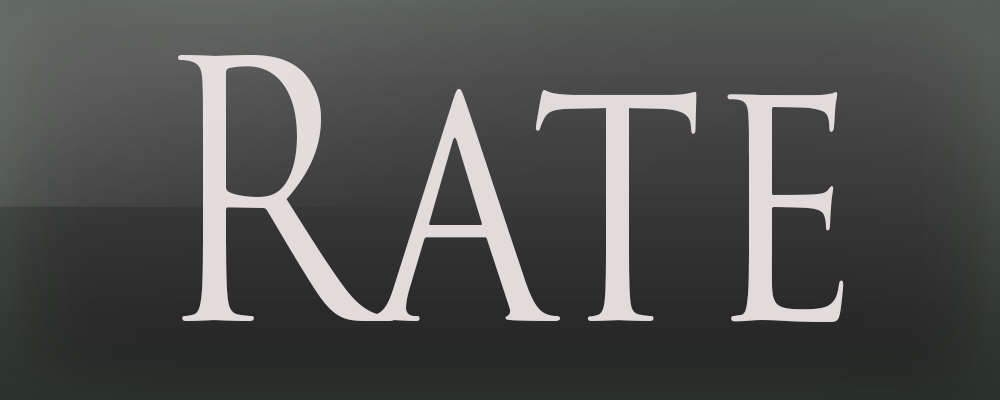
<style>
.page{position:relative;width:1000px;height:400px}
.page>*{position:absolute;margin:0}
.t1{font:352.2px "TrajanPro-Regular";color:#e2dbdb;scale:0.81 1}
</style>
<div class="page">
<p class="t1" style="left:178px;top:54px;width:666px;height:268px">Rate</p>
</div>
